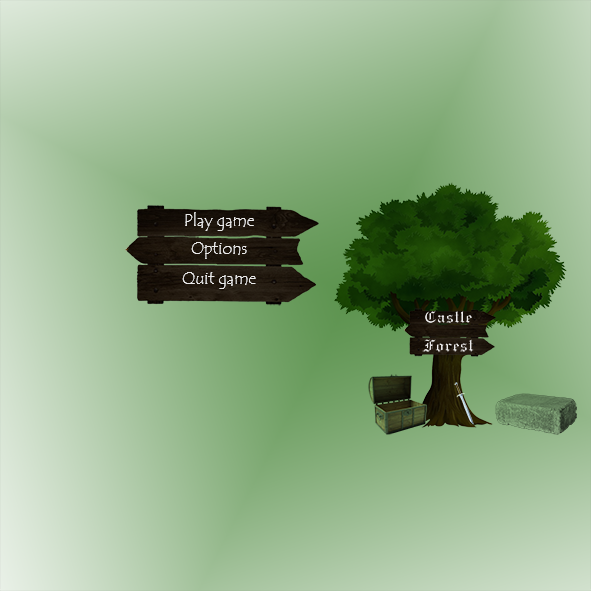
<style>
.page{position:relative;width:591px;height:591px}
.page>*{position:absolute;margin:0}
.t1{font:16.5px "TempusSansITC";color:#ebebeb}
.t2{font:15px/28.4px "GothicE";color:#ebebeb}
</style>
<div class="page">
<p class="t1" style="left:185px;top:212px;width:69px;height:19px">Play game</p>
<p class="t1" style="left:191px;top:242px;width:56px;height:17px">Options</p>
<p class="t1" style="left:182px;top:272px;width:74px;height:17px">Quit game</p>
<p class="t2" style="left:422px;top:310px;width:52px;height:42px;text-align:center">Castle <br>Forest</p>
</div>
